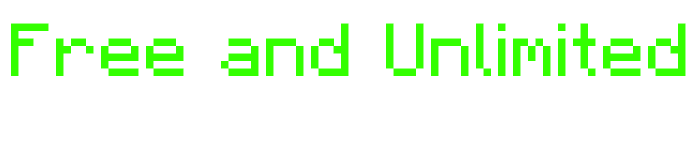
<style>
.page{position:relative;width:700px;height:150px;background:#ffffff}
.page>*{position:absolute;margin:0}
.t1{font:75px "Minecraft-Regular";color:#33ff00}
</style>
<div class="page">
<p class="t1" style="left:11px;top:23px;width:675px;height:53px">Free and Unlimited</p>
</div>
